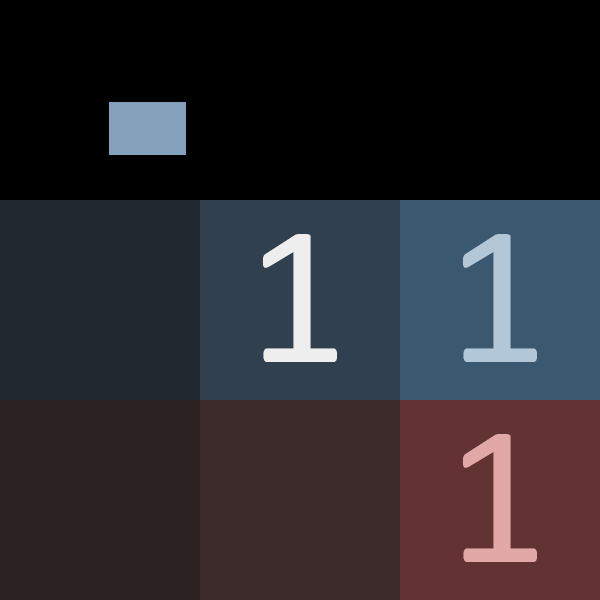
<style>
.page{position:relative;width:600px;height:600px;background:#000000}
.page>*{position:absolute;margin:0}
.t1{font:201px "Calibri";color:#eeeeee}
.t2{font:201px "Calibri";color:#b2c7d8}
.t3{font:201px "Calibri";color:#e1a8a8}
</style>
<div class="page">
<p class="t1" style="left:262px;top:234px;width:75px;height:128px">1</p>
<p class="t2" style="left:462px;top:234px;width:75px;height:128px">1</p>
<p class="t3" style="left:462px;top:434px;width:75px;height:128px">1</p>
</div>
